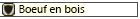
<style>
.page{position:relative;width:140px;height:19px;background:#ffffff}
.page>*{position:absolute;margin:0}
.t1{font:10.9px "LaoUI";color:#000000}
</style>
<div class="page">
<p class="t1" style="left:19px;top:5px;width:66px;height:8px">Boeuf en bois</p>
</div>
